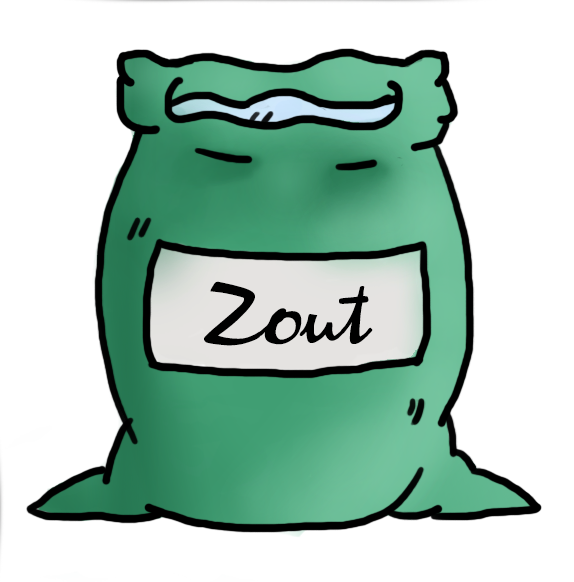
<style>
.page{position:relative;width:574px;height:582px;background:#ffffff}
.page>*{position:absolute;margin:0}
.t1{font:79.2px "Borealis";color:#000000}
</style>
<div class="page">
<p class="t1" style="left:204px;top:281px;width:169px;height:65px">Zout</p>
</div>
